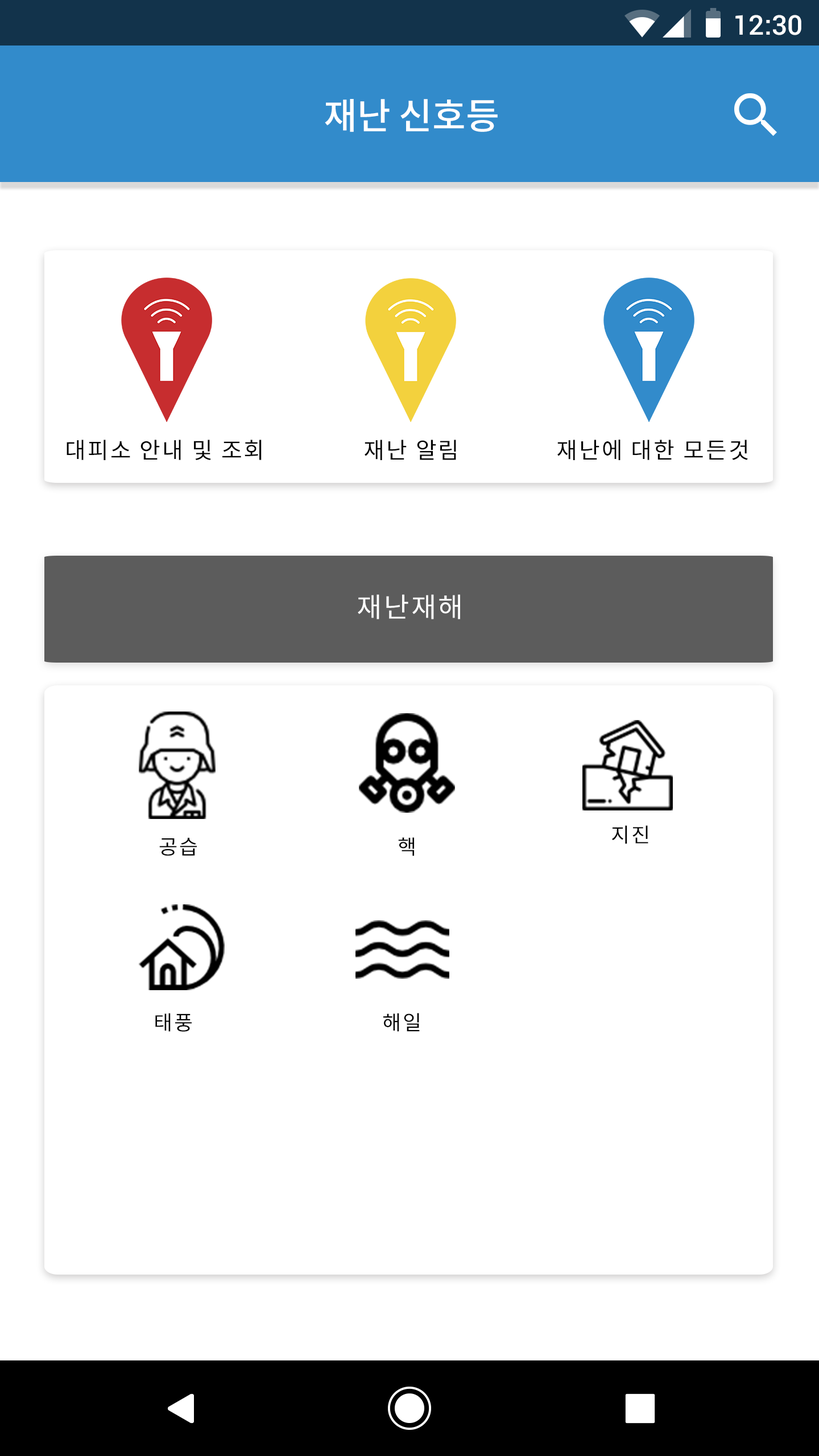
<style>
.page{position:relative;width:819px;height:1456px;background:#ffffff}
.page>*{position:absolute;margin:0}
.t1{font:27.3px "Roboto-Medium";color:#ffffff}
.t2{font:36.4px "NotoSansCJKkr-Medium";color:#ffffff}
.t3{font:22.7px "NotoSansCJKkr-Regular";letter-spacing:0.075em;color:#000000}
.t4{font:27.3px "NotoSansCJKkr-Regular";letter-spacing:0.075em;color:#ffffff}
.t5{font:20.5px "NotoSansCJKkr-Regular";letter-spacing:0.075em;color:#000000}
</style>
<div class="page">
<p class="t1" style="left:735px;top:15px;width:66px;height:20px">12:30</p>
<p class="t2" style="left:325px;top:99px;width:173px;height:33px">재난 신호등</p>
<p class="t3" style="left:67px;top:440px;width:195px;height:20px">대피소 안내 및 조회</p>
<p class="t3" style="left:365px;top:440px;width:91px;height:20px">재난 알림</p>
<p class="t3" style="left:557px;top:440px;width:191px;height:20px">재난에 대한 모든것</p>
<p class="t4" style="left:358px;top:594px;width:102px;height:25px">재난재해</p>
<p class="t5" style="left:612px;top:825px;width:36px;height:19px">지진</p>
<p class="t5" style="left:159px;top:838px;width:38px;height:18px">공습</p>
<p class="t5" style="left:398px;top:837px;width:16px;height:19px">핵</p>
<p class="t5" style="left:155px;top:1013px;width:37px;height:19px">태풍</p>
<p class="t5" style="left:383px;top:1013px;width:37px;height:19px">해일</p>
</div>
